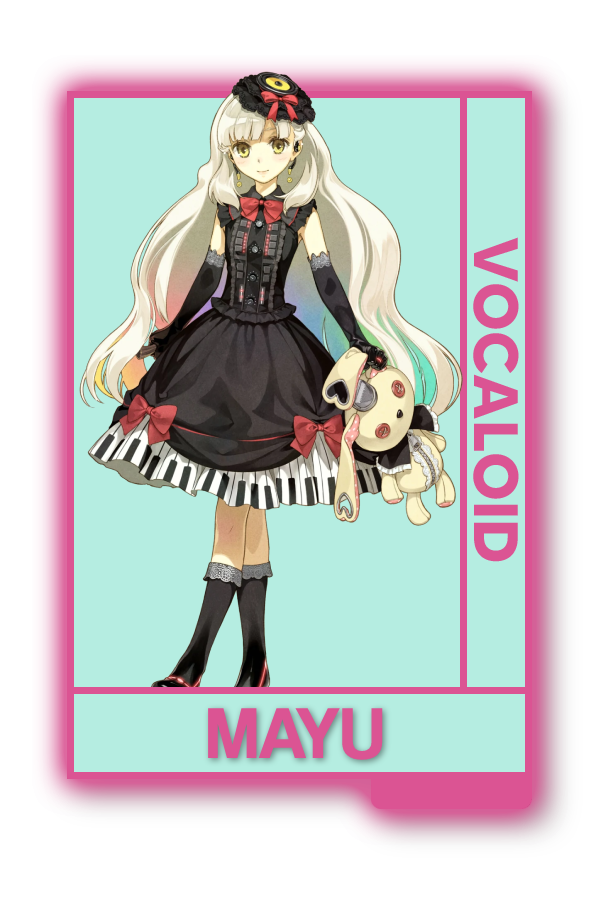
<style>
.page{position:relative;width:600px;height:900px;background:#b5ede1}
.page>*{position:absolute;margin:0}
.t1{font:62.5px "MADETOMMY-Bold";color:#db5493}
.t2{font:75px "CoolveticaRg-Regular";color:#db5493}
</style>
<div class="page">
<p class="t1" style="left:473px;top:237px;width:46px;height:325px;rotate:90deg">VOCALOID</p>
<p class="t2" style="left:208px;top:708px;width:175px;height:52px">MAYU</p>
</div>
